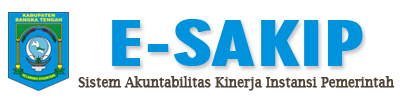
<style>
.page{position:relative;width:400px;height:100px;background:#ffffff}
.page>*{position:absolute;margin:0}
.t1{font:59px "Geometric706BT-BlackCondensedB";color:#0093dd;font-weight:bold;scale:1.36 1}
.t2{font:13.9px "LucidaBright";color:#504335;font-weight:bold;scale:0.9 1}
</style>
<div class="page">
<p class="t1" style="left:112px;top:19px;width:251px;height:47px">E-SAKIP</p>
<p class="t2" style="left:78px;top:76px;width:317px;height:15px">Sistem Akuntabilitas Kinerja Instansi Pemerintah</p>
</div>
